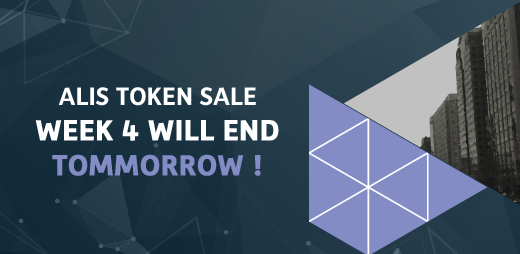
<style>
.page{position:relative;width:520px;height:254px}
.page>*{position:absolute;margin:0}
.t1{font:25.5px/35.2px "Depot-Bold";color:#ffffff;text-transform:uppercase}
.t2{font:29.1px/35.2px "Depot-Bold";color:#ffffff;text-transform:uppercase;font-weight:bold}
.t3{font:29.1px/35.2px "Depot-Bold";color:#838cc5;text-transform:uppercase;font-weight:bold}
</style>
<div class="page">
<p class="t1" style="left:35px;top:87px;width:244px;height:89px;text-align:center">ALIS TOKEN SALE<br><span class="t2">WEEK 4 WILL END<br></span><span class="t3">Tommorrow !</span></p>
</div>
